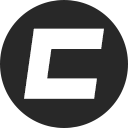
<style>
.page{position:relative;width:128px;height:128px;background:#282828}
.page>*{position:absolute;margin:0}
.t1{font:102px "SacredHertz";color:#ffffff}
</style>
<div class="page">
<p class="t1" style="left:24px;top:28px;width:80px;height:71px">c</p>
</div>
